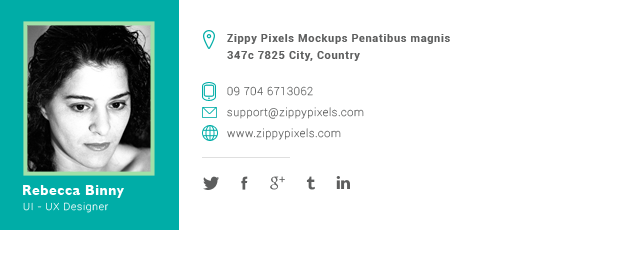
<style>
.page{position:relative;width:620px;height:259px;background:#ffffff}
.page>*{position:absolute;margin:0}
.t1{font:11px/16.5px "Roboto-Bold";letter-spacing:0.06em;color:#5d5e5e}
.t2{font:11px/10.5px "Roboto-Thin";letter-spacing:0.06em;color:#5d5e5e}
.t3{font:14px "GillSansMT-Bold";letter-spacing:0.04em;color:#ffffff}
.t4{font:10px "Roboto-Thin";letter-spacing:0.08em}
</style>
<div class="page">
<p class="t1" style="left:227px;top:34px;width:223px;height:27px">Zippy Pixels Mockups Penatibus magnis<br>347c 7825 City, Country</p>
<p class="t2" style="left:227px;top:86px;width:137px;height:54px">09 704 6713062<br><br>support@zippypixels.com<br><br>www.zippypixels.com</p>
<p class="t3" style="left:23px;top:185px;width:101px;height:13px">Rebecca Binny</p>
<p class="t4" style="left:23px;top:202px;width:86px;height:11px">UI - UX Designer</p>
</div>
